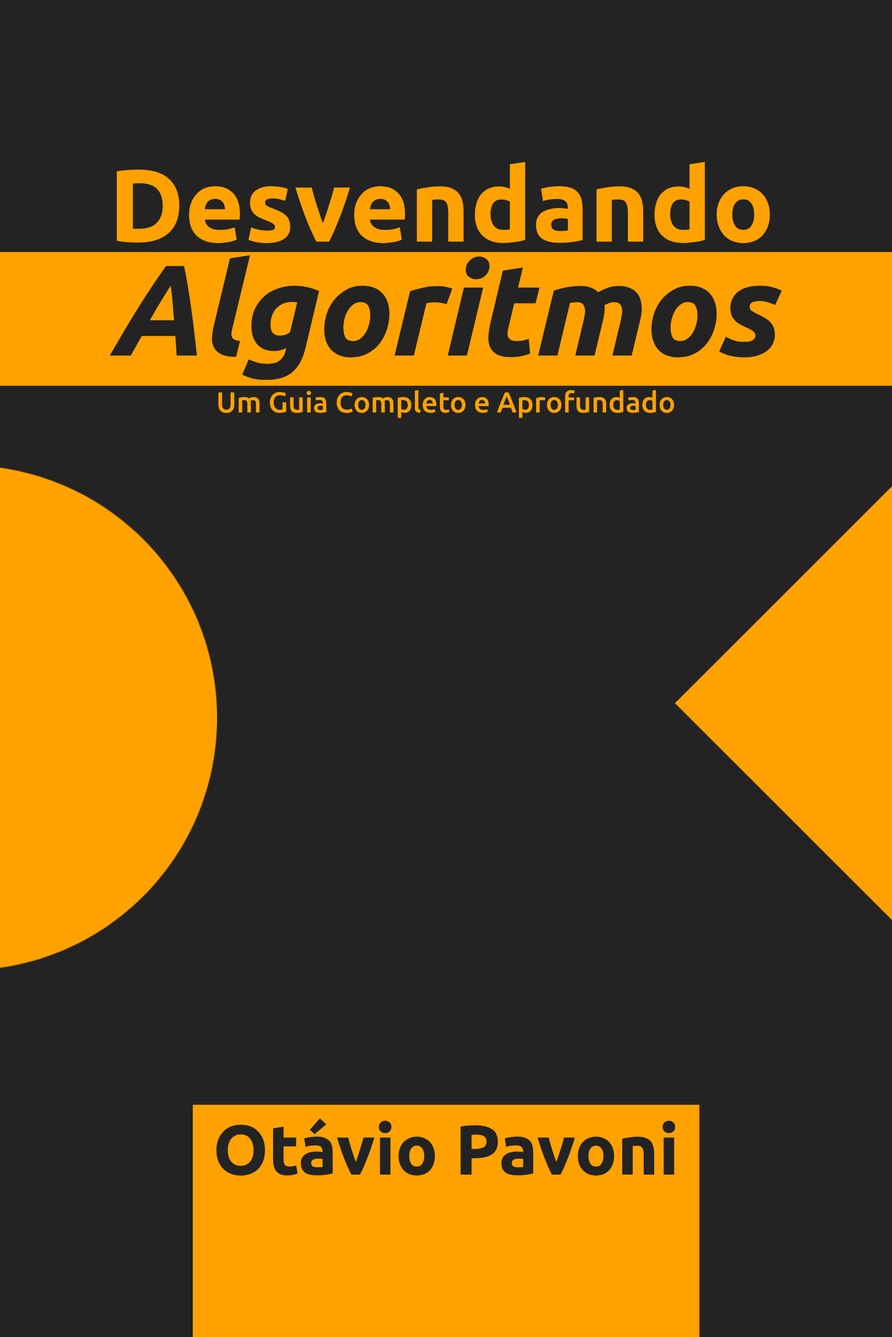
<style>
.page{position:relative;width:892px;height:1337px;background:#232323}
.page>*{position:absolute;margin:0}
.t1{font:28.9px "Ubuntu-Medium";color:#ffa200}
.t2{font:70.3px "Ubuntu-Bold";color:#232323}
</style>
<div class="page">
<p class="t1" style="left:218px;top:390px;width:456px;height:28px">Um Guia Completo e Aprofundado</p>
<p class="t2" style="left:216px;top:1118px;width:459px;height:58px">Otávio Pavoni</p>
</div>
